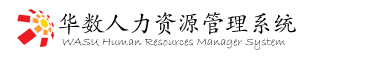
<style>
.page{position:relative;width:379px;height:61px;background:#ffffff}
.page>*{position:absolute;margin:0}
.t1{font:24px "FZKTJW--GB1-0";color:#020202}
.t2{font:12px "BradleyHandITC"}
</style>
<div class="page">
<p class="t1" style="left:58px;top:12px;width:238px;height:23px">华数人力资源管理系统</p>
<p class="t2" style="left:62px;top:38px;width:224px;height:12px">WASU Human Resources Manager System</p>
</div>
